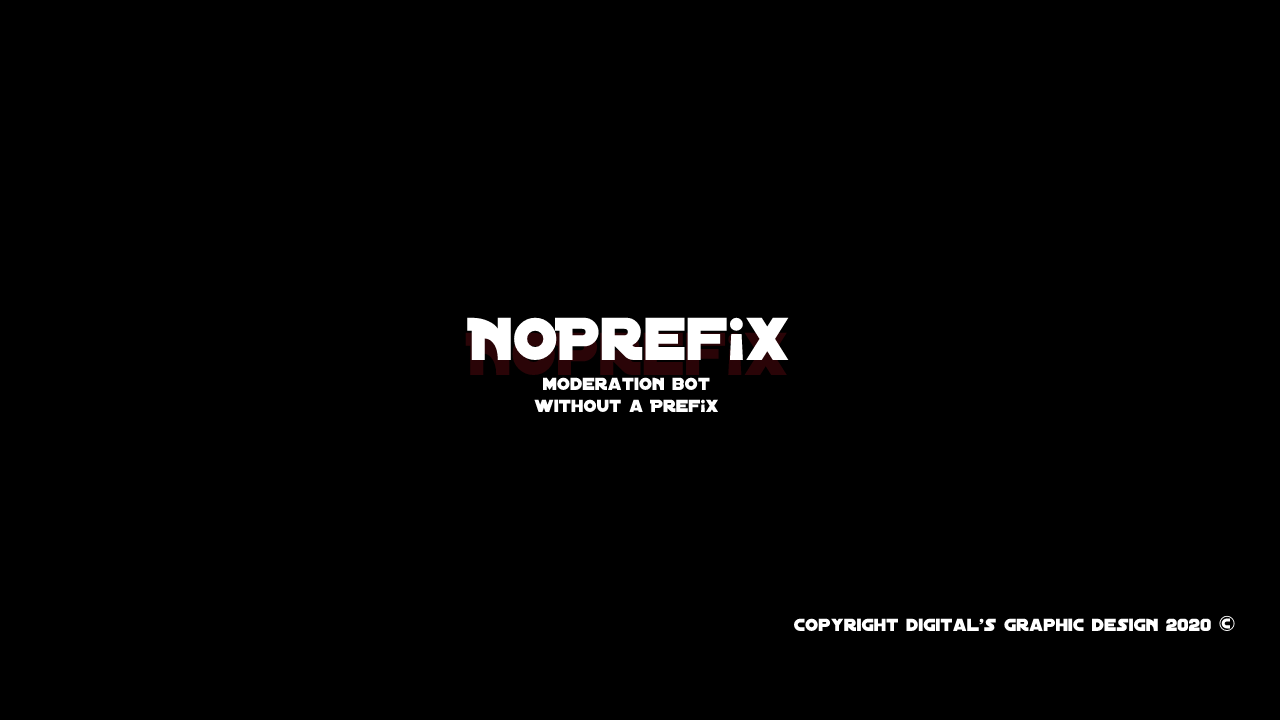
<style>
.page{position:relative;width:1280px;height:720px;background:#000000}
.page>*{position:absolute;margin:0}
.t1{font:65px "DistantGalaxy";color:#ffffff}
.t2{font:19px "DistantGalaxy";color:#ffffff}
.t3{font:46px "DistantGalaxy";color:#ffffff}
</style>
<div class="page">
<p class="t1" style="left:467px;top:317px;width:322px;height:43px">NoPref¡x</p>
<p class="t2" style="left:534px;top:377px;width:185px;height:35px;text-align:center">moderation bot<br>without a Pref¡x</p>
<p class="t2" style="left:794px;top:615px;width:441px;height:16px">Copyright digital's graphic design 2020 <span class="t3">©</span></p>
</div>
